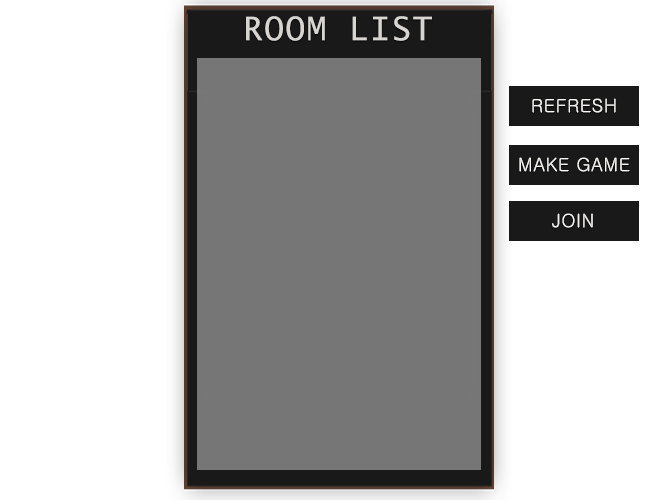
<style>
.page{position:relative;width:650px;height:500px;background:#ffffff}
.page>*{position:absolute;margin:0}
.t1{font:32px "LucidaSans-Typewriter";letter-spacing:0.06em;color:#d8d5d0;text-transform:uppercase}
.t2{font:18px "Gulim";letter-spacing:0.04em;color:#f9f8f5;text-transform:uppercase}
.t3{font:18px "Gulim";letter-spacing:0.04em;color:#f5f4f0;text-transform:uppercase}
.t4{font:18px "Gulim";letter-spacing:0.04em;color:#f4f2ee;text-transform:uppercase}
</style>
<div class="page">
<p class="t1" style="left:246px;top:16px;width:186px;height:25px">ROOM LIST</p>
<p class="t2" style="left:532px;top:98px;width:84px;height:15px">REFRESH</p>
<p class="t3" style="left:519px;top:157px;width:111px;height:15px">MAKE GAME</p>
<p class="t4" style="left:552px;top:213px;width:41px;height:15px">JOIN</p>
</div>
